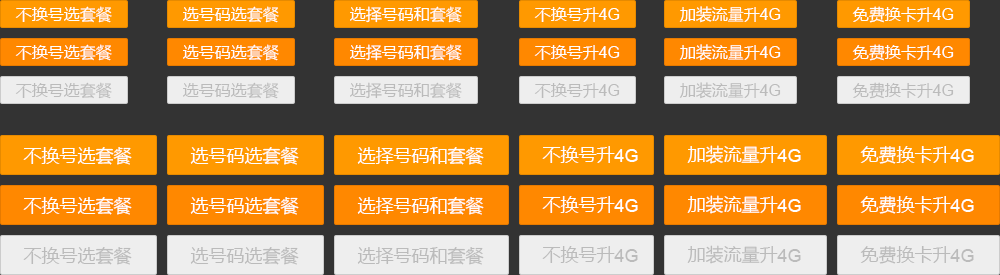
<style>
.page{position:relative;width:1000px;height:275px;background:#333333}
.page>*{position:absolute;margin:0}
.t1{font:16px "MicrosoftYaHei";color:#ffffff}
.t2{font:16px "ArialMT";color:#ffffff}
.t3{font:16px "MicrosoftYaHei";color:#bbbbbb}
.t4{font:16px "ArialMT";color:#bbbbbb}
.t5{font:18px "MicrosoftYaHei";color:#ffffff}
.t6{font:18px "ArialMT";color:#ffffff}
.t7{font:18px "MicrosoftYaHei";color:#bbbbbb}
.t8{font:18px "ArialMT";color:#bbbbbb}
</style>
<div class="page">
<p class="t1" style="left:15px;top:6px;width:97px;height:17px">不换号选套餐</p>
<p class="t1" style="left:183px;top:6px;width:96px;height:17px">选号码选套餐</p>
<p class="t1" style="left:350px;top:6px;width:112px;height:17px">选择号码和套餐</p>
<p class="t1" style="left:679px;top:6px;width:102px;height:17px">加装流量升<span class="t2">4G</span></p>
<p class="t1" style="left:852px;top:6px;width:102px;height:17px">免费换卡升<span class="t2">4G</span></p>
<p class="t1" style="left:534px;top:7px;width:86px;height:15px">不换号升<span class="t2">4G</span></p>
<p class="t1" style="left:15px;top:44px;width:97px;height:17px">不换号选套餐</p>
<p class="t1" style="left:183px;top:44px;width:96px;height:17px">选号码选套餐</p>
<p class="t1" style="left:350px;top:44px;width:112px;height:17px">选择号码和套餐</p>
<p class="t1" style="left:534px;top:45px;width:86px;height:15px">不换号升<span class="t2">4G</span></p>
<p class="t1" style="left:679px;top:44px;width:102px;height:17px">加装流量升<span class="t2">4G</span></p>
<p class="t1" style="left:852px;top:44px;width:102px;height:17px">免费换卡升<span class="t2">4G</span></p>
<p class="t3" style="left:15px;top:82px;width:97px;height:17px">不换号选套餐</p>
<p class="t3" style="left:183px;top:82px;width:96px;height:17px">选号码选套餐</p>
<p class="t3" style="left:350px;top:82px;width:112px;height:17px">选择号码和套餐</p>
<p class="t3" style="left:534px;top:83px;width:86px;height:15px">不换号升<span class="t4">4G</span></p>
<p class="t3" style="left:679px;top:82px;width:102px;height:17px">加装流量升<span class="t4">4G</span></p>
<p class="t3" style="left:852px;top:82px;width:102px;height:17px">免费换卡升<span class="t4">4G</span></p>
<p class="t5" style="left:23px;top:147px;width:109px;height:18px">不换号选套餐</p>
<p class="t5" style="left:190px;top:147px;width:109px;height:18px">选号码选套餐</p>
<p class="t5" style="left:357px;top:147px;width:127px;height:18px">选择号码和套餐</p>
<p class="t5" style="left:542px;top:146px;width:96px;height:17px">不换号升<span class="t6">4G</span></p>
<p class="t5" style="left:687px;top:145px;width:114px;height:19px">加装流量升<span class="t6">4G</span></p>
<p class="t5" style="left:860px;top:146px;width:114px;height:18px">免费换卡升<span class="t6">4G</span></p>
<p class="t5" style="left:23px;top:197px;width:109px;height:18px">不换号选套餐</p>
<p class="t5" style="left:190px;top:197px;width:109px;height:18px">选号码选套餐</p>
<p class="t5" style="left:357px;top:197px;width:127px;height:18px">选择号码和套餐</p>
<p class="t5" style="left:542px;top:196px;width:96px;height:17px">不换号升<span class="t6">4G</span></p>
<p class="t5" style="left:687px;top:195px;width:114px;height:19px">加装流量升<span class="t6">4G</span></p>
<p class="t5" style="left:860px;top:196px;width:114px;height:18px">免费换卡升<span class="t6">4G</span></p>
<p class="t7" style="left:542px;top:246px;width:96px;height:17px">不换号升<span class="t8">4G</span></p>
<p class="t7" style="left:687px;top:245px;width:114px;height:19px">加装流量升<span class="t8">4G</span></p>
<p class="t7" style="left:860px;top:246px;width:114px;height:18px">免费换卡升<span class="t8">4G</span></p>
<p class="t7" style="left:23px;top:247px;width:109px;height:18px">不换号选套餐</p>
<p class="t7" style="left:190px;top:247px;width:109px;height:18px">选号码选套餐</p>
<p class="t7" style="left:357px;top:247px;width:127px;height:18px">选择号码和套餐</p>
</div>
